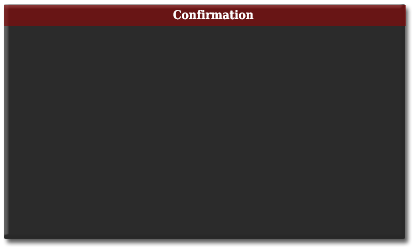
<style>
.page{position:relative;width:416px;height:248px;background:#2b2b2b}
.page>*{position:absolute;margin:0}
.t1{font:12px "DejaVuSerifCondensed-Bold";color:#fdfdfd}
</style>
<div class="page">
<p class="t1" style="left:173px;top:10px;width:81px;height:10px">Confirmation</p>
</div>
